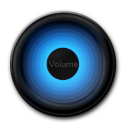
<style>
.page{position:relative;width:128px;height:128px;background:#ffffff}
.page>*{position:absolute;margin:0}
.t1{font:9px "BerlinSansFB-Reg";color:#3e3b3b}
</style>
<div class="page">
<p class="t1" style="left:49px;top:60px;width:29px;height:7px">Volume</p>
</div>
